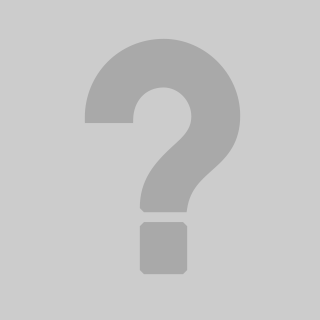
<style>
.page{position:relative;width:320px;height:320px;background:#cccccc}
.page>*{position:absolute;margin:0}
.t1{font:310px "LubalinGraphStd-Demi";letter-spacing:-0.02em;color:#a9a9a9;font-weight:bold}
</style>
<div class="page">
<p class="t1" style="left:84px;top:38px;width:157px;height:237px">?</p>
</div>
